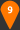
<style>
.page{position:relative;width:20px;height:30px;background:#ff7800}
.page>*{position:absolute;margin:0}
.t1{font:9px "OpenSans";color:#ffffff;font-weight:bold}
</style>
<div class="page">
<p class="t1" style="left:7px;top:6px;width:6px;height:8px">9</p>
</div>
